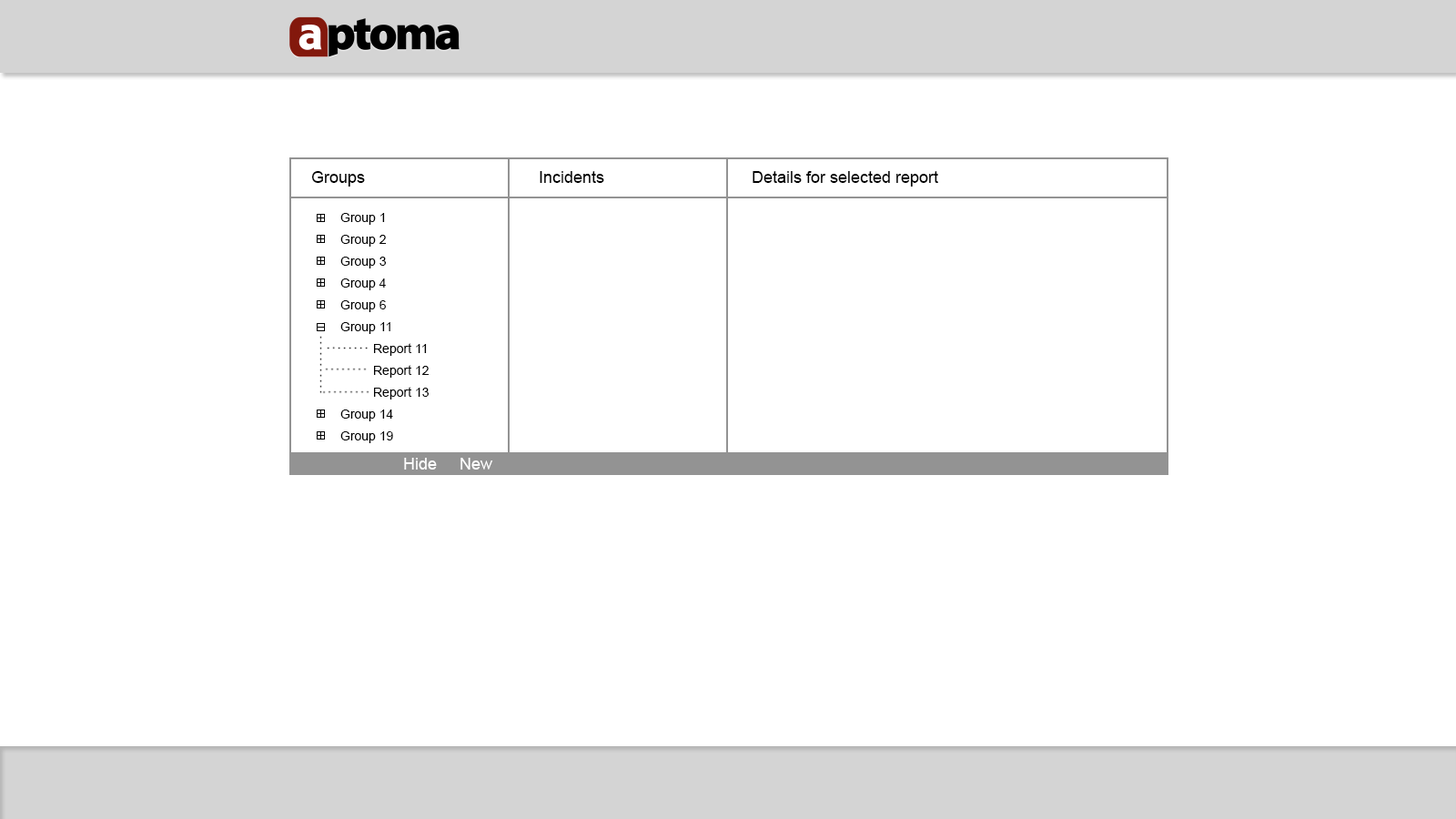
<style>
.page{position:relative;width:1456px;height:819px;background:#ffffff}
.page>*{position:absolute;margin:0}
.t1{font:16.4px "ArialMT";color:#000000}
.t2{font:12.7px/21.8px "ArialMT";color:#000000}
.t3{font:16.4px "ArialMT";color:#ffffff}
</style>
<div class="page">
<p class="t1" style="left:311px;top:171px;width:54px;height:16px">Groups</p>
<p class="t1" style="left:540px;top:171px;width:64px;height:12px">Incidents</p>
<p class="t1" style="left:753px;top:171px;width:185px;height:16px">Details for selected report</p>
<p class="t2" style="left:340px;top:213px;width:89px;height:230px">Group 1<br>Group 2<br>Group 3<br>Group 4<br>Group 6<br>Group 11<br> Report 11<br> Report 12<br> Report 13<br>Group 14<br>Group 19</p>
<p class="t3" style="left:404px;top:458px;width:33px;height:12px">Hide</p>
<p class="t3" style="left:460px;top:458px;width:33px;height:12px">New</p>
</div>
